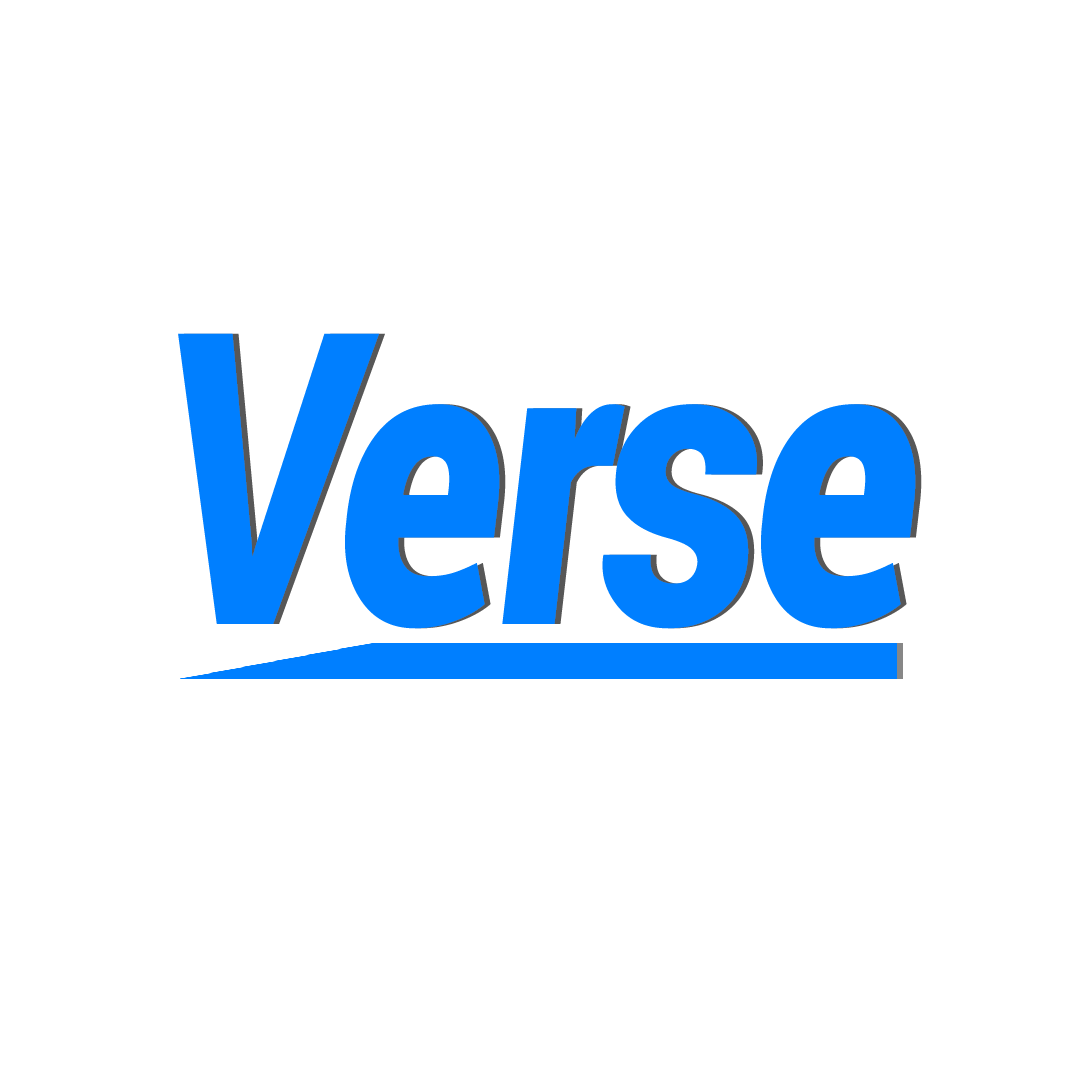
<style>
.page{position:relative;width:1080px;height:1080px;background:#ffffff}
.page>*{position:absolute;margin:0}
.t1{font:408.3px "Roboto-BlackItalic";letter-spacing:-0.01em;color:#007fff;scale:0.77 1}
</style>
<div class="page">
<p class="t1" style="left:178px;top:333px;width:738px;height:296px">Verse</p>
<p class="t1" style="left:184px;top:333px;width:738px;height:296px;opacity:0.66">Verse</p>
</div>
